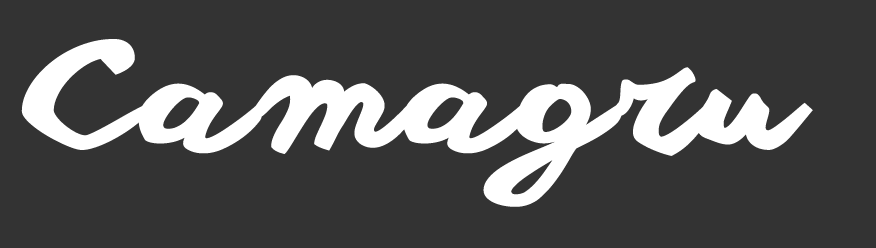
<style>
.page{position:relative;width:876px;height:248px;background:#333333}
.page>*{position:absolute;margin:0}
.t1{font:150px "anothershabby";color:#ffffff;scale:1.17 1}
</style>
<div class="page">
<p class="t1" style="left:21px;top:39px;width:792px;height:168px">Camagru</p>
</div>
